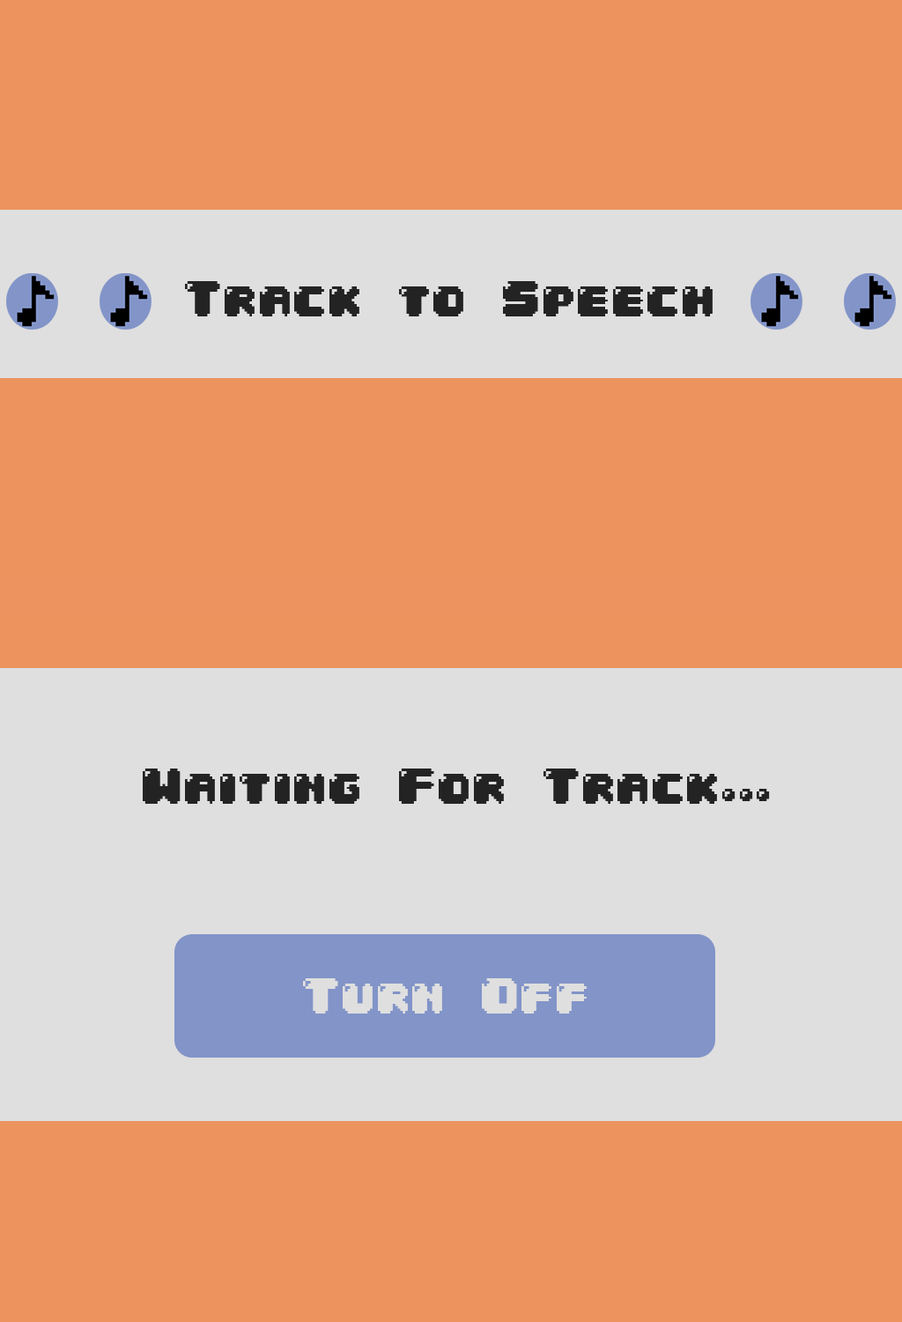
<style>
.page{position:relative;width:902px;height:1322px;background:#ec935e}
.page>*{position:absolute;margin:0}
.t1{font:42.3px "04b30";color:#222322}
.t2{font:42.3px "04b30";color:#dfdfdf}
</style>
<div class="page">
<p class="t1" style="left:185px;top:281px;width:528px;height:35px">Track to Speech</p>
<p class="t1" style="left:143px;top:768px;width:627px;height:36px">Waiting For Track...</p>
<p class="t2" style="left:303px;top:978px;width:284px;height:35px">Turn Off</p>
</div>
